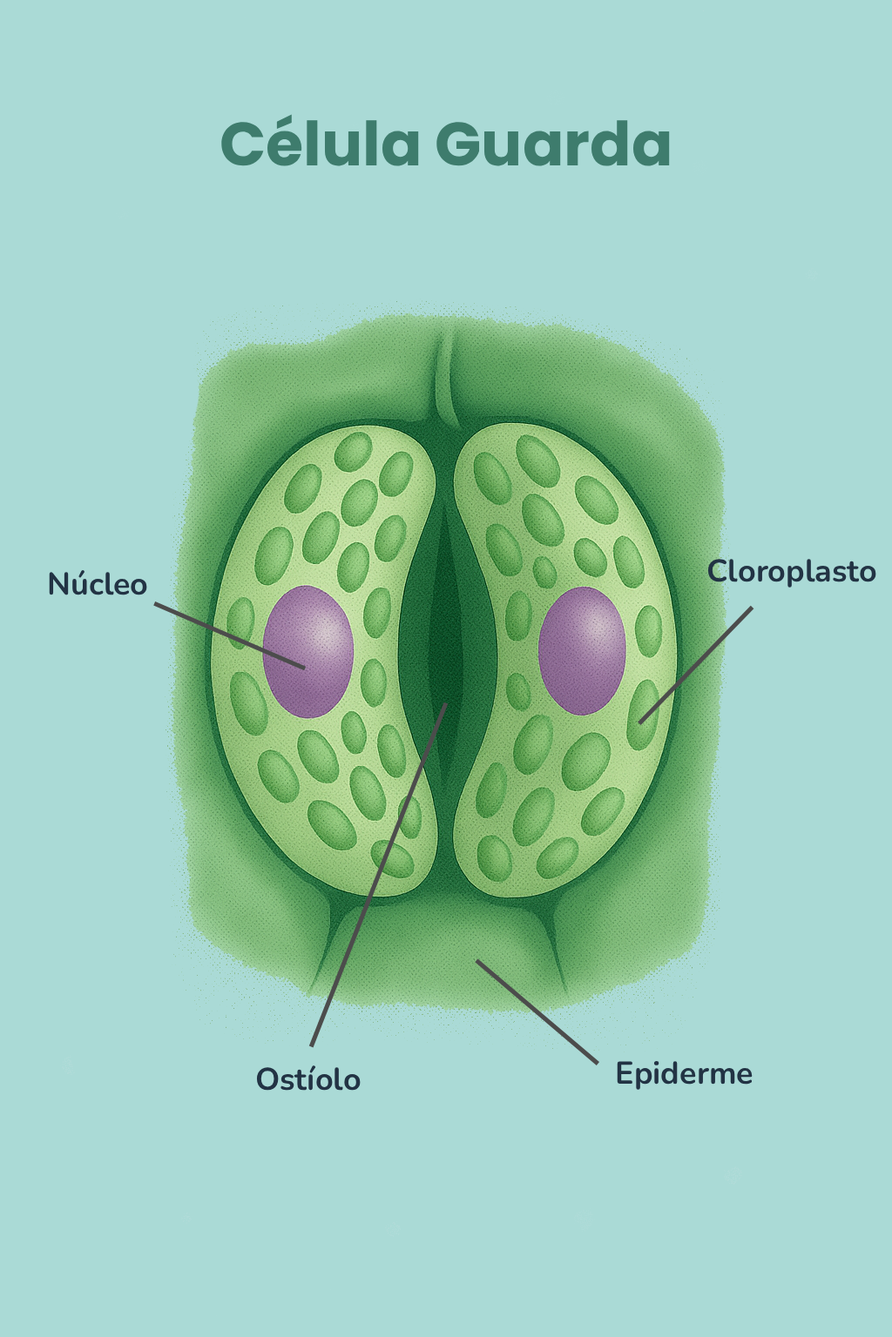
<style>
.page{position:relative;width:892px;height:1337px;background:#aadad6}
.page>*{position:absolute;margin:0}
.t1{font:60.9px "Poppins-Bold";color:#3e7c6d}
.t2{font:31.3px "Nunito-Bold";color:#223344}
</style>
<div class="page">
<p class="t1" style="left:221px;top:114px;width:449px;height:52px">Célula Guarda</p>
<p class="t2" style="left:49px;top:569px;width:98px;height:27px">Núcleo</p>
<p class="t2" style="left:707px;top:559px;width:169px;height:29px">Cloroplasto</p>
<p class="t2" style="left:616px;top:1061px;width:136px;height:29px">Epiderme</p>
<p class="t2" style="left:256px;top:1066px;width:104px;height:25px">Ostíolo</p>
</div>
